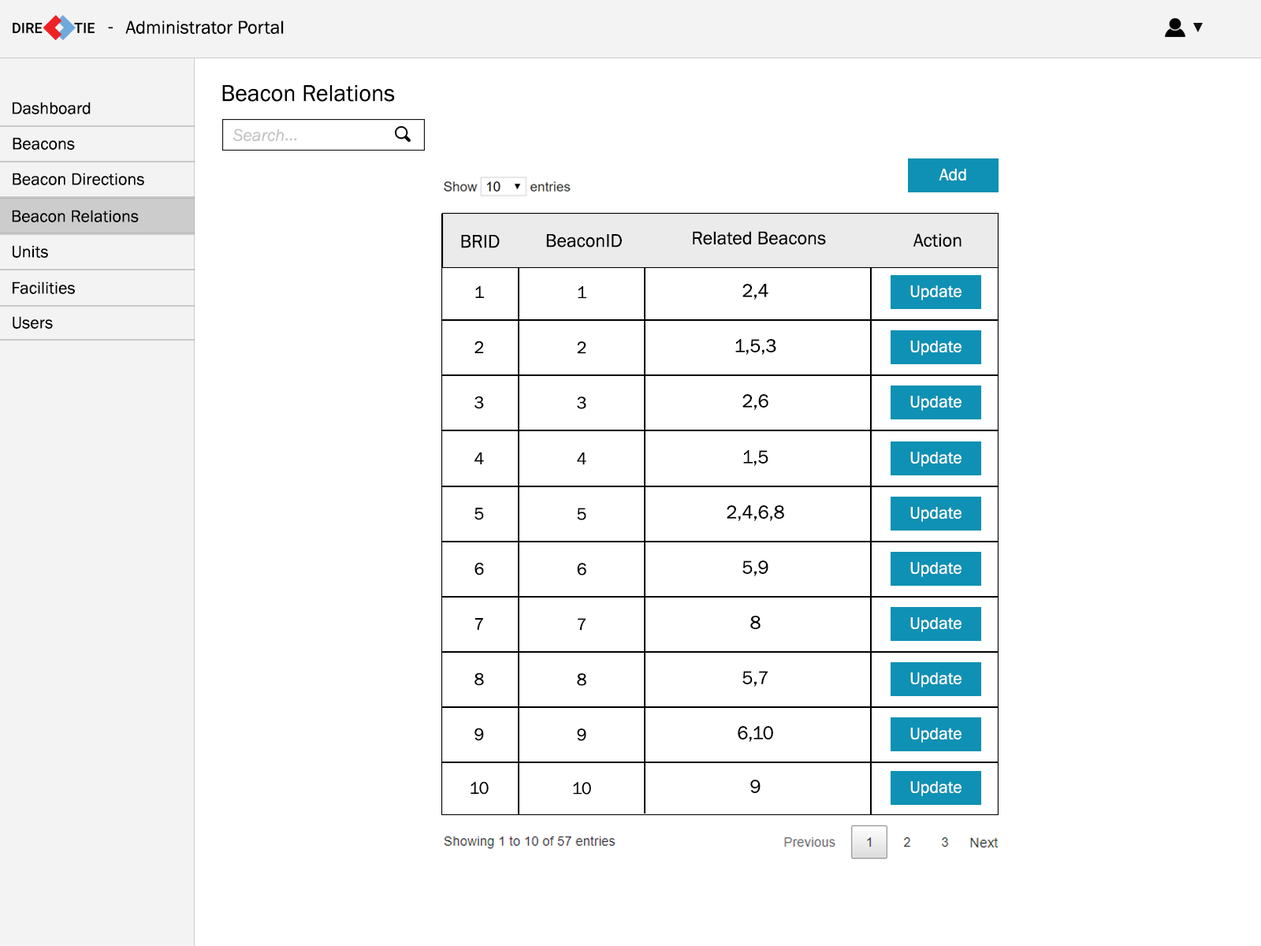
<style>
.page{position:relative;width:1261px;height:946px;background:#ffffff}
.page>*{position:absolute;margin:0}
.t1{font:18.9px "FranklinGothic-Book";color:#000000}
.t2{font:23.6px "FranklinGothic-Book";color:#000000}
.t3{font:17.3px "FranklinGothic-Book";color:#000000}
.t4{font:17.3px "FranklinGothic-Book";color:#ffffff}
</style>
<div class="page">
<p class="t1" style="left:108px;top:27px;width:5px;height:1px">-</p>
<p class="t1" style="left:125px;top:20px;width:159px;height:14px">Administrator Portal</p>
<p class="t2" style="left:222px;top:85px;width:173px;height:17px">Beacon Relations</p>
<p class="t3" style="left:13px;top:102px;width:78px;height:12px">Dashboard</p>
<p class="t3" style="left:13px;top:137px;width:62px;height:13px">Beacons</p>
<p class="t3" style="left:13px;top:173px;width:131px;height:12px">Beacon Directions</p>
<p class="t4" style="left:939px;top:169px;width:27px;height:11px">Add</p>
<p class="t3" style="left:12px;top:210px;width:127px;height:12px">Beacon Relations</p>
<p class="t1" style="left:693px;top:231px;width:133px;height:14px">Related Beacons</p>
<p class="t1" style="left:913px;top:233px;width:48px;height:14px">Action</p>
<p class="t3" style="left:13px;top:245px;width:35px;height:13px">Units</p>
<p class="t1" style="left:461px;top:235px;width:39px;height:13px">BRID</p>
<p class="t1" style="left:546px;top:234px;width:76px;height:13px">BeaconID</p>
<p class="t3" style="left:13px;top:281px;width:62px;height:13px">Facilities</p>
<p class="t3" style="left:475px;top:285px;width:9px;height:13px">1</p>
<p class="t3" style="left:578px;top:286px;width:8px;height:13px">1</p>
<p class="t1" style="left:742px;top:284px;width:26px;height:15px">2,4</p>
<p class="t4" style="left:910px;top:285px;width:51px;height:15px">Update</p>
<p class="t3" style="left:13px;top:316px;width:40px;height:13px">Users</p>
<p class="t3" style="left:474px;top:340px;width:10px;height:13px">2</p>
<p class="t3" style="left:577px;top:341px;width:9px;height:13px">2</p>
<p class="t1" style="left:735px;top:339px;width:41px;height:16px">1,5,3</p>
<p class="t4" style="left:910px;top:340px;width:51px;height:15px">Update</p>
<p class="t3" style="left:474px;top:396px;width:10px;height:13px">3</p>
<p class="t3" style="left:577px;top:396px;width:9px;height:13px">3</p>
<p class="t1" style="left:742px;top:394px;width:26px;height:16px">2,6</p>
<p class="t4" style="left:910px;top:396px;width:51px;height:15px">Update</p>
<p class="t1" style="left:743px;top:450px;width:25px;height:16px">1,5</p>
<p class="t3" style="left:474px;top:452px;width:10px;height:12px">4</p>
<p class="t3" style="left:577px;top:452px;width:9px;height:13px">4</p>
<p class="t4" style="left:910px;top:452px;width:51px;height:15px">Update</p>
<p class="t3" style="left:474px;top:508px;width:10px;height:12px">5</p>
<p class="t3" style="left:577px;top:508px;width:9px;height:12px">5</p>
<p class="t1" style="left:727px;top:505px;width:57px;height:16px">2,4,6,8</p>
<p class="t4" style="left:910px;top:507px;width:51px;height:15px">Update</p>
<p class="t3" style="left:474px;top:562px;width:10px;height:13px">6</p>
<p class="t3" style="left:577px;top:563px;width:9px;height:12px">6</p>
<p class="t1" style="left:742px;top:560px;width:26px;height:16px">5,9</p>
<p class="t4" style="left:910px;top:562px;width:51px;height:15px">Update</p>
<p class="t3" style="left:475px;top:618px;width:8px;height:12px">7</p>
<p class="t3" style="left:578px;top:618px;width:8px;height:12px">7</p>
<p class="t1" style="left:750px;top:615px;width:10px;height:14px">8</p>
<p class="t4" style="left:910px;top:617px;width:51px;height:15px">Update</p>
<p class="t3" style="left:474px;top:672px;width:10px;height:14px">8</p>
<p class="t3" style="left:577px;top:673px;width:9px;height:13px">8</p>
<p class="t1" style="left:742px;top:671px;width:26px;height:15px">5,7</p>
<p class="t4" style="left:910px;top:672px;width:51px;height:15px">Update</p>
<p class="t1" style="left:738px;top:726px;width:35px;height:16px">6,10</p>
<p class="t3" style="left:474px;top:727px;width:10px;height:14px">9</p>
<p class="t3" style="left:577px;top:728px;width:9px;height:13px">9</p>
<p class="t4" style="left:910px;top:727px;width:51px;height:15px">Update</p>
<p class="t3" style="left:470px;top:781px;width:19px;height:13px">10</p>
<p class="t3" style="left:573px;top:782px;width:18px;height:12px">10</p>
<p class="t1" style="left:750px;top:779px;width:10px;height:14px">9</p>
<p class="t4" style="left:910px;top:781px;width:51px;height:15px">Update</p>
</div>
